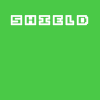
<style>
.page{position:relative;width:100px;height:100px;background:#4ac947}
.page>*{position:absolute;margin:0}
.t1{font:11px "SmallHollows";letter-spacing:0.025em;color:#ffffff}
</style>
<div class="page">
<p class="t1" style="left:10px;top:15px;width:79px;height:11px">SHIELD</p>
</div>
